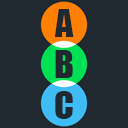
<style>
.page{position:relative;width:128px;height:128px;background:#202830}
.page>*{position:absolute;margin:0}
.t1{font:35.6px "Impact";color:#202830}
</style>
<div class="page">
<p class="t1" style="left:54px;top:9px;width:20px;height:28px">A</p>
<p class="t1" style="left:55px;top:50px;width:18px;height:28px">B</p>
<p class="t1" style="left:55px;top:91px;width:18px;height:28px">C</p>
</div>
